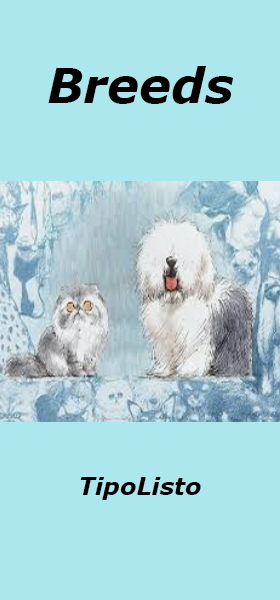
<style>
.page{position:relative;width:280px;height:600px;background:#ace7ed}
.page>*{position:absolute;margin:0}
.t1{font:48px "Verdana-BoldItalic";color:#000000}
.t2{font:24px "Verdana-BoldItalic";color:#010101}
</style>
<div class="page">
<p class="t1" style="left:48px;top:66px;width:186px;height:38px">Breeds</p>
<p class="t2" style="left:80px;top:477px;width:121px;height:23px">TipoListo</p>
</div>
